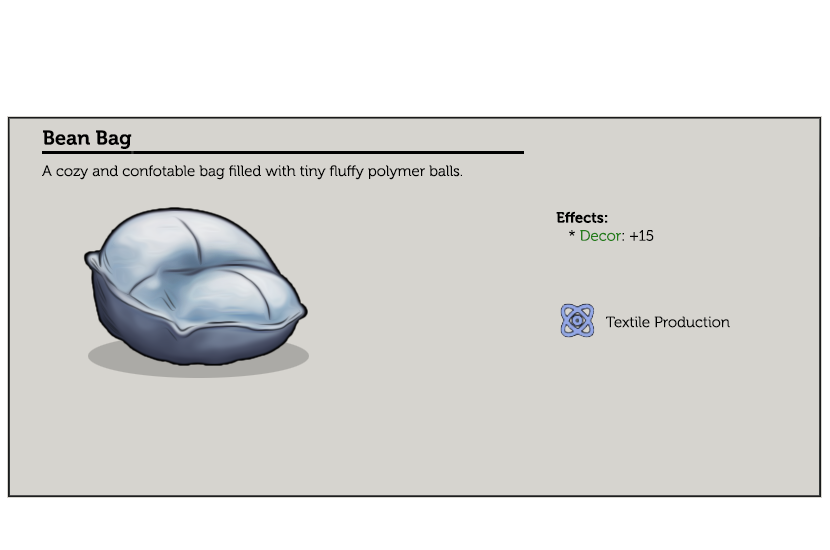
<style>
.page{position:relative;width:830px;height:550px;background:#d6d4cf}
.page>*{position:absolute;margin:0}
.t1{font:20px "Museo-700";color:#000000}
.t2{font:15px "Museo-300";color:#000000}
.t3{font:15px "Museo-700";color:#000000}
.t4{font:15px "Museo-300";color:#247d1a}
.t5{font:15px "Museo-300";color:#020202}
</style>
<div class="page">
<p class="t1" style="left:43px;top:130px;width:89px;height:19px">Bean Bag</p>
<p class="t2" style="left:42px;top:165px;width:420px;height:15px">A cozy and confotable bag filled with tiny fluffy polymer balls.</p>
<p class="t3" style="left:556px;top:211px;width:98px;height:30px">Effects:<br><span class="t2">   * </span><span class="t4">Decor</span><span class="t2">: +15</span></p>
<p class="t5" style="left:606px;top:316px;width:124px;height:12px">Textile Production</p>
</div>
